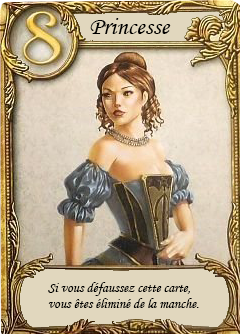
<style>
.page{position:relative;width:240px;height:334px}
.page>*{position:absolute;margin:0}
.t1{font:25px "MonotypeCorsiva";color:#000000}
.t2{font:14px "MonotypeCorsiva";color:#000000}
</style>
<div class="page">
<p class="t1" style="left:90px;top:18px;width:81px;height:16px">Princesse</p>
<p class="t2" style="left:48px;top:282px;width:151px;height:26px">Si vous défaussez cette carte, vous êtes éliminé de la manche.</p>
</div>
